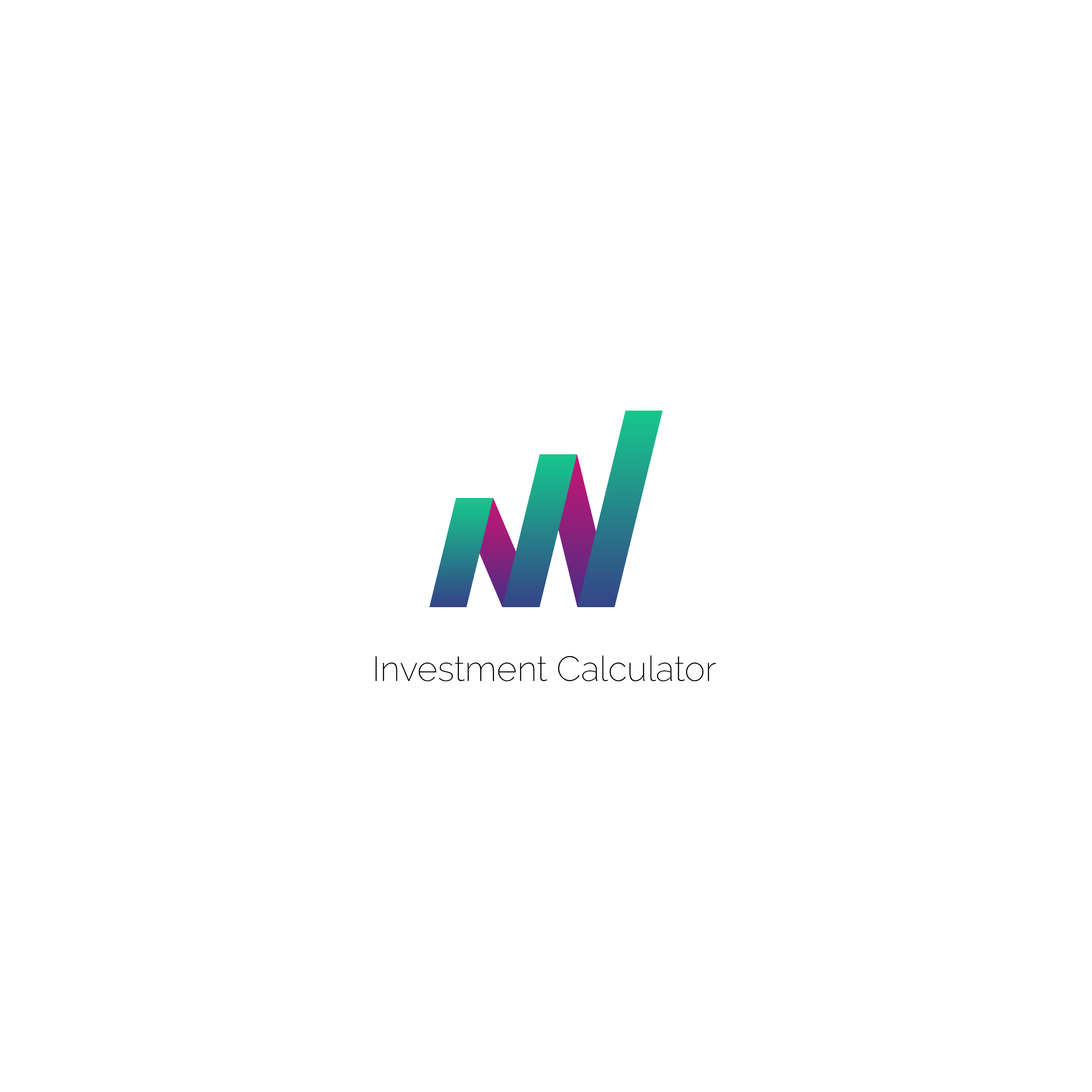
<style>
.page{position:relative;width:1092px;height:1092px;background:#ffffff}
.page>*{position:absolute;margin:0}
.t1{font:34.9px "Raleway-ExtraLight";color:#000000}
</style>
<div class="page">
<p class="t1" style="left:375px;top:655px;width:341px;height:26px">Investment Calculator</p>
</div>
